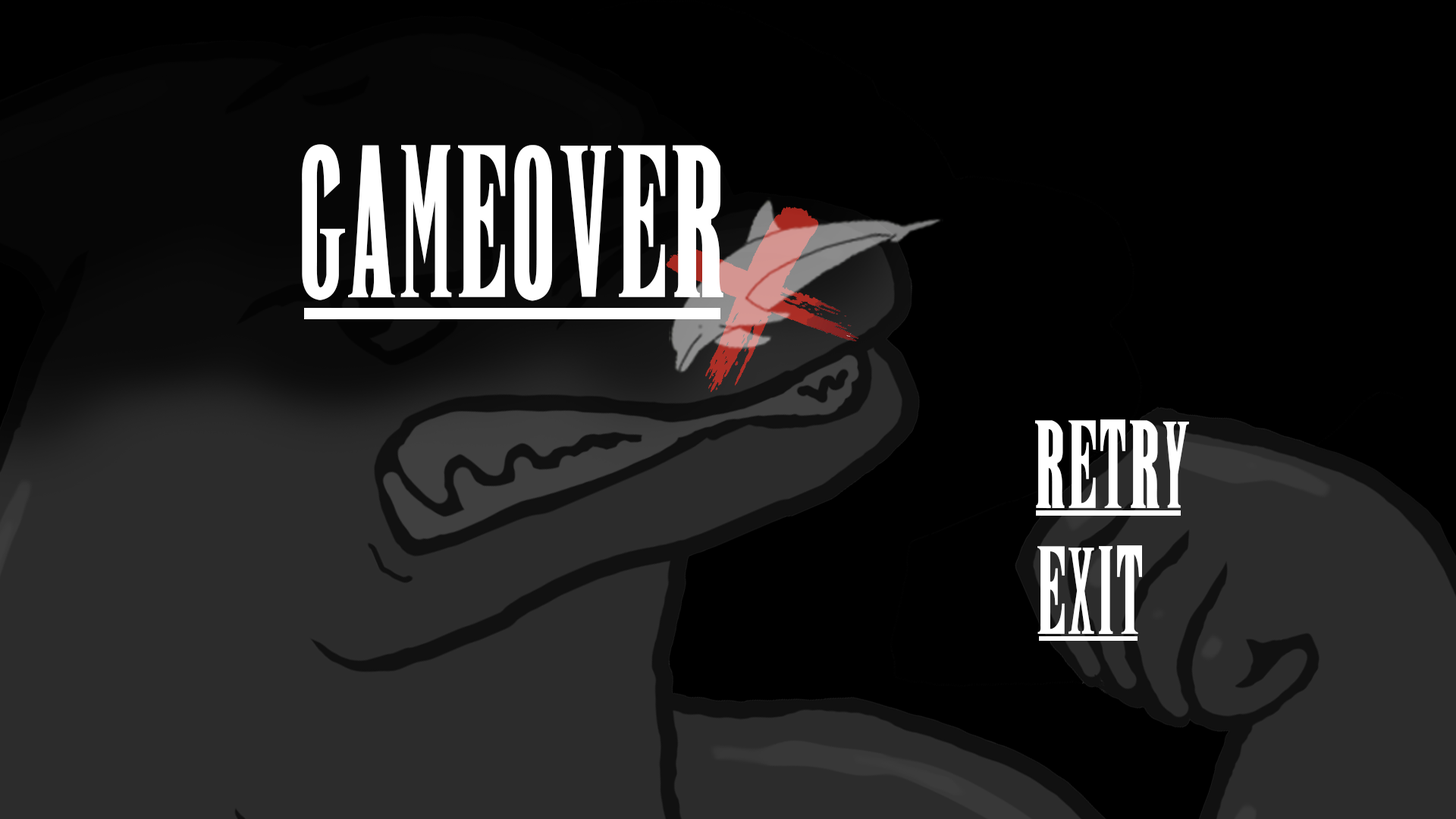
<style>
.page{position:relative;width:1456px;height:819px;background:#000000}
.page>*{position:absolute;margin:0}
.t1{font:157.7px "New";color:#ffffff}
.t2{font:91px "New";color:#ffffff}
</style>
<div class="page">
<p class="t1" style="left:302px;top:144px;width:421px;height:157px">GAMEOVER</p>
<p class="t2" style="left:1035px;top:419px;width:154px;height:89px">RETRY</p>
<p class="t2" style="left:1037px;top:545px;width:105px;height:89px">EXIT</p>
</div>
